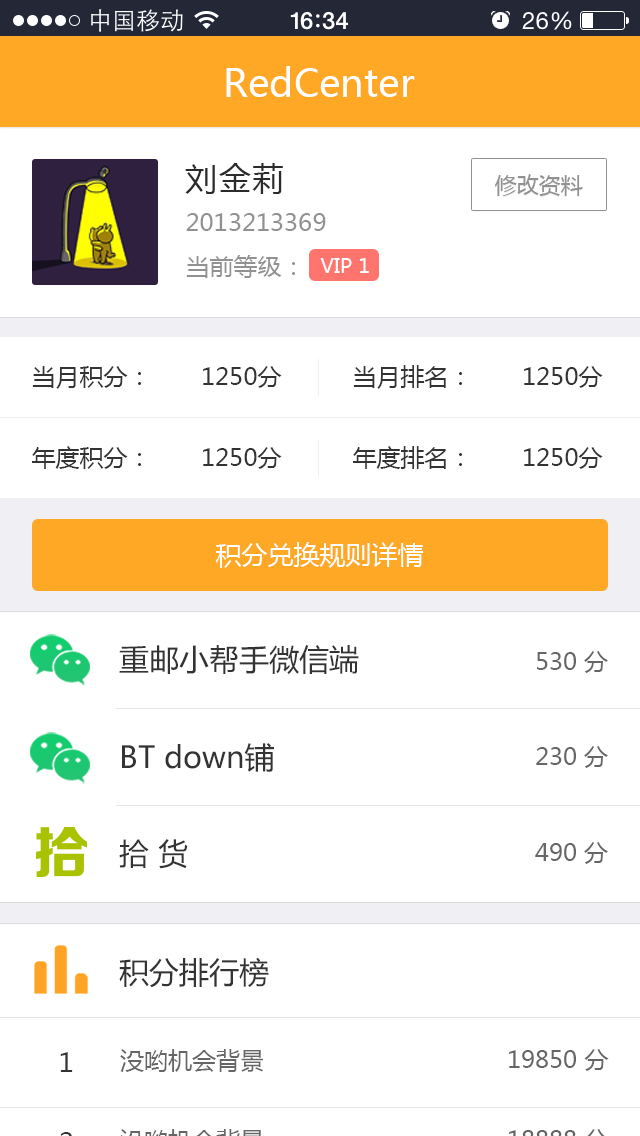
<style>
.page{position:relative;width:640px;height:1136px;background:#ffffff}
.page>*{position:absolute;margin:0}
.t1{font:38px "MicrosoftYaHei";color:#ffffff}
.t2{font:32px "MicrosoftYaHei";letter-spacing:0.05em;color:#2b2b2b}
.t3{font:22px "MicrosoftYaHei";color:#929191}
.t4{font:24px "MicrosoftYaHei";color:#929191}
.t5{font:20px "MicrosoftYaHei";color:#ffffff}
.t6{font:24px "MicrosoftYaHei";color:#333333}
.t7{font:26px "MicrosoftYaHei";color:#ffffff}
.t8{font:30px "MicrosoftYaHei";color:#333333}
.t9{font:24px "MicrosoftYaHei";color:#666666}
.t10{font:26px "MicrosoftYaHei";color:#333333}
</style>
<div class="page">
<p class="t1" style="left:226px;top:66px;width:189px;height:31px">RedCenter</p>
<p class="t2" style="left:185px;top:163px;width:98px;height:31px">刘金莉</p>
<p class="t3" style="left:495px;top:174px;width:88px;height:22px">修改资料</p>
<p class="t4" style="left:186px;top:213px;width:140px;height:18px">2013213369</p>
<p class="t4" style="left:186px;top:255px;width:109px;height:23px">当前等级：</p>
<p class="t5" style="left:320px;top:258px;width:49px;height:15px">VIP 1</p>
<p class="t6" style="left:32px;top:366px;width:250px;height:23px">当月积分：       1250分</p>
<p class="t6" style="left:353px;top:365px;width:250px;height:24px">当月排名：       1250分</p>
<p class="t6" style="left:32px;top:446px;width:250px;height:23px">年度积分：       1250分</p>
<p class="t6" style="left:353px;top:446px;width:250px;height:23px">年度排名：       1250分</p>
<p class="t7" style="left:216px;top:542px;width:208px;height:26px">积分兑换规则详情</p>
<p class="t8" style="left:119px;top:645px;width:240px;height:30px">重邮小帮手微信端</p>
<p class="t9" style="left:537px;top:651px;width:71px;height:22px">530 分</p>
<p class="t8" style="left:122px;top:743px;width:152px;height:29px">BT down铺</p>
<p class="t9" style="left:536px;top:746px;width:72px;height:22px">230 分</p>
<p class="t8" style="left:119px;top:839px;width:69px;height:30px">拾 货</p>
<p class="t9" style="left:535px;top:842px;width:73px;height:22px">490 分</p>
<p class="t8" style="left:119px;top:957px;width:150px;height:31px">积分排行榜</p>
<p class="t9" style="left:120px;top:1049px;width:143px;height:23px">没哟机会背景</p>
<p class="t9" style="left:509px;top:1049px;width:100px;height:22px">19850 分</p>
<p class="t10" style="left:60px;top:1052px;width:13px;height:20px">1</p>
</div>
